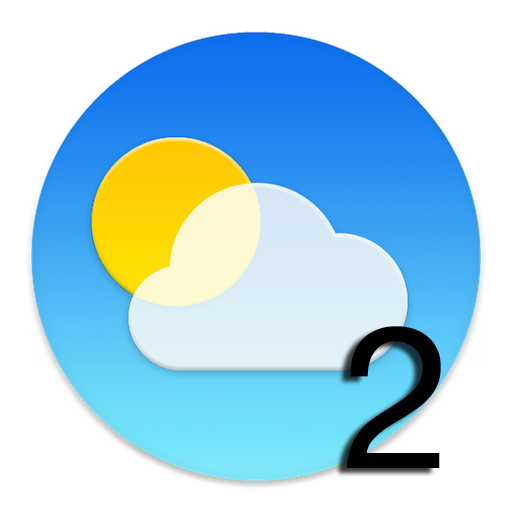
<style>
.page{position:relative;width:512px;height:512px;background:#ffffff}
.page>*{position:absolute;margin:0}
.t1{font:200px "HelveticaNeue";color:#000000}
</style>
<div class="page">
<p class="t1" style="left:346px;top:326px;width:95px;height:142px">2</p>
</div>
